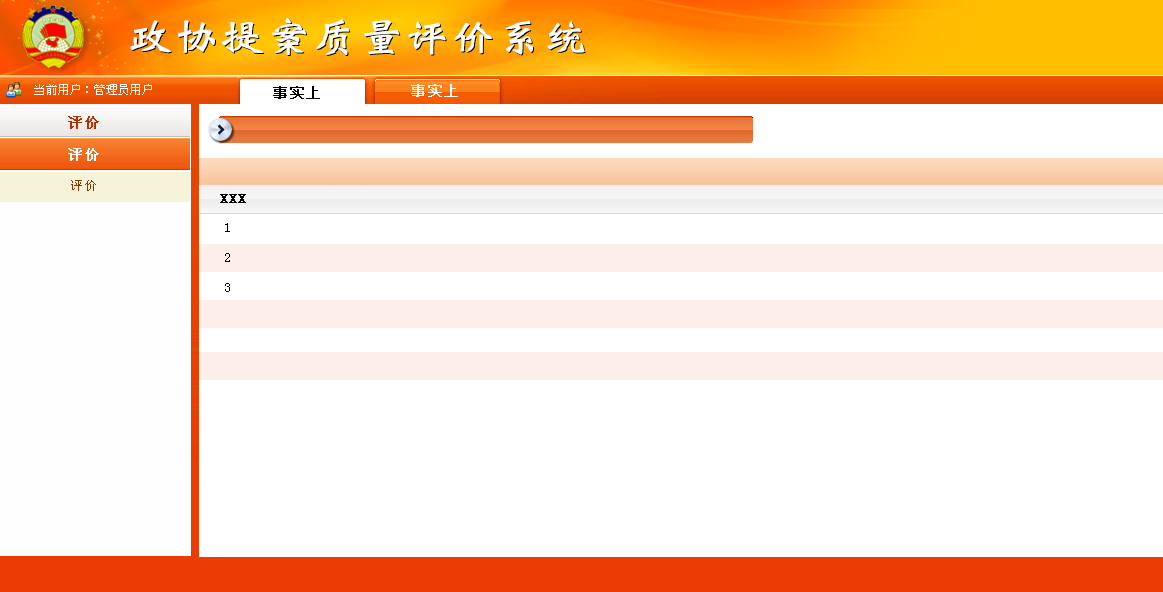
<style>
.page{position:relative;width:1163px;height:592px;background:#ffffff}
.page>*{position:absolute;margin:0}
.t1{font:40px "DFPWeiBeiW7";letter-spacing:0.05em;color:#fefffe;scale:1.1 1}
.t2{font:12px "SimSun";color:#ffffff}
.t3{font:14px "SimSun";letter-spacing:0.1em;color:#000000;font-weight:bold}
.t4{font:14px "SimSun";letter-spacing:0.1em;color:#ffffff;font-weight:bold}
.t5{font:14px "SimSun";letter-spacing:0.1em;color:#b23200;font-weight:bold}
.t6{font:12px "SimSun";letter-spacing:0.1em;color:#8e3601}
.t7{font:14px/30px "SimSun";letter-spacing:0.1em;color:#000000}
</style>
<div class="page">
<p class="t1" style="left:130px;top:17px;width:455px;height:38px">政协提案质量评价系统</p>
<p class="t2" style="left:34px;top:84px;width:118px;height:11px">当前用户：管理员用户</p>
<p class="t3" style="left:273px;top:86px;width:47px;height:13px">事实上</p>
<p class="t4" style="left:411px;top:84px;width:47px;height:13px">事实上</p>
<p class="t5" style="left:68px;top:116px;width:31px;height:13px">评价</p>
<p class="t4" style="left:68px;top:148px;width:31px;height:13px">评价</p>
<p class="t6" style="left:71px;top:180px;width:25px;height:11px">评价</p>
<p class="t3" style="left:220px;top:194px;width:26px;height:9px">XXX</p>
<p class="t7" style="left:225px;top:223px;width:5px;height:69px;text-align:center">1<br>2<br>3</p>
</div>
